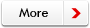
<style>
.page{position:relative;width:90px;height:28px}
.page>*{position:absolute;margin:0}
.t1{font:14px "TwCenMT-Regular";color:#000000}
</style>
<div class="page">
<p class="t1" style="left:19px;top:8px;width:29px;height:9px">More</p>
</div>
